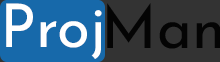
<style>
.page{position:relative;width:220px;height:62px;background:#333333}
.page>*{position:absolute;margin:0}
.t1{font:60px "JosefinSans-Regular";color:#ffffff}
.t2{font:60px "JosefinSans-Regular";color:#040404}
</style>
<div class="page">
<p class="t1" style="left:6px;top:3px;width:96px;height:56px">Proj</p>
<p class="t2" style="left:107px;top:3px;width:114px;height:46px">Man</p>
</div>
